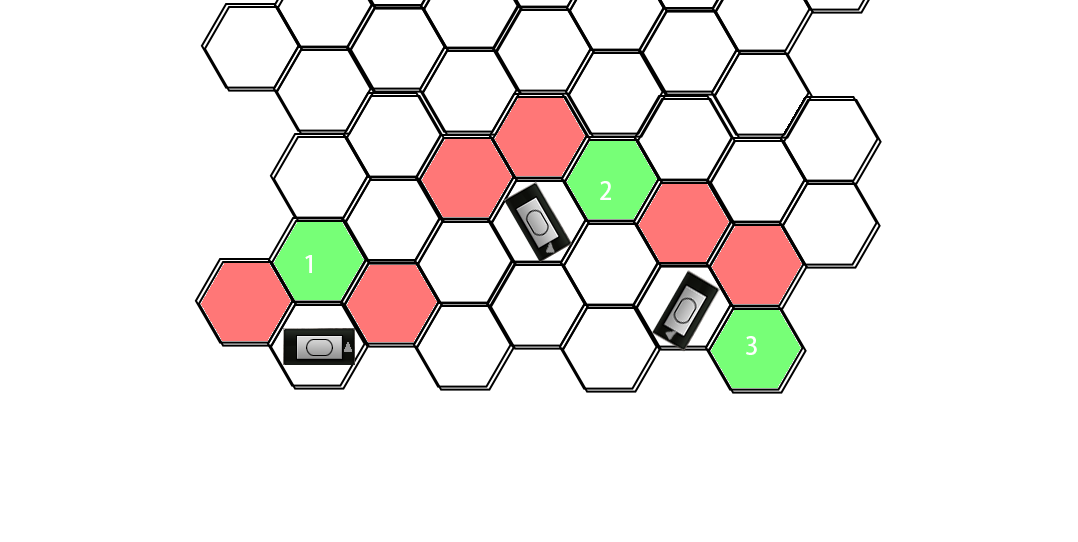
<style>
.page{position:relative;width:1078px;height:542px;background:#ffffff}
.page>*{position:absolute;margin:0}
.t1{font:24px "AdobeHeitiStd-Regular";color:#ffffff}
</style>
<div class="page">
<p class="t1" style="left:600px;top:181px;width:11px;height:19px">2</p>
<p class="t1" style="left:305px;top:255px;width:7px;height:18px">1</p>
<p class="t1" style="left:746px;top:336px;width:11px;height:19px">3</p>
</div>
